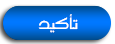
<style>
.page{position:relative;width:115px;height:44px}
.page>*{position:absolute;margin:0}
.t1{font:24px "MO_Nawel";letter-spacing:-0.08em;color:#ffffff}
</style>
<div class="page">
<p class="t1" style="left:38px;top:14px;width:40px;height:19px">تأ  كيد</p>
</div>
